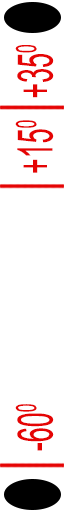
<style>
.page{position:relative;width:64px;height:512px;background:#ffffff}
.page>*{position:absolute;margin:0}
.t1{font:48.8px "ArialMT";color:#e50404;scale:0.55 1}
</style>
<div class="page">
<p class="t1" style="left:15px;top:45px;width:39px;height:53px;rotate:-90deg">+350</p>
<p class="t1" style="left:15px;top:120px;width:39px;height:53px;rotate:-90deg">+150</p>
<p class="t1" style="left:15px;top:404px;width:39px;height:47px;rotate:-90deg">-600</p>
</div>
